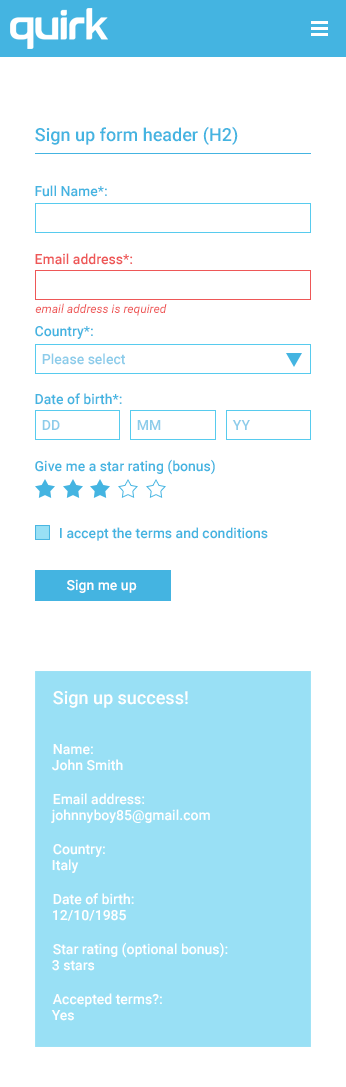
<style>
.page{position:relative;width:346px;height:1087px;background:#ffffff}
.page>*{position:absolute;margin:0}
.t1{font:18px "Roboto-Medium";color:#44b4e1}
.t2{font:14px "Roboto-Medium";color:#44b4e1}
.t3{font:14px/18px "Roboto-Medium";color:#ee5757}
.t4{font:14px/18px "Roboto-Medium";color:#44b4e1}
.t5{font:12px "Roboto-Italic";color:#ee5757}
.t6{font:14px "Roboto-Medium";color:#8cccea}
.t7{font:14px "Roboto-Medium";color:#ffffff}
.t8{font:14px/50px "Roboto-Medium";color:#ffffff}
.t9{font:18px/25px "Roboto-Medium";color:#ffffff}
</style>
<div class="page">
<p class="t1" style="left:35px;top:126px;width:203px;height:19px">Sign up form header (H2)</p>
<p class="t2" style="left:35px;top:185px;width:233px;height:356px">Full Name*:<br><br><br><br><span class="t3">Email address*:<br></span><span class="t4"><br><br><br>Country*:<br></span><br><br><br>Date of birth*:<br><br><br><br>Give me a star rating (bonus)<br><br><br><br>       I accept the terms and conditions</p>
<p class="t5" style="left:35px;top:303px;width:132px;height:13px">email address is required</p>
<p class="t6" style="left:42px;top:353px;width:83px;height:12px">Please select</p>
<p class="t6" style="left:42px;top:420px;width:18px;height:10px">DD</p>
<p class="t6" style="left:137px;top:420px;width:24px;height:10px">MM</p>
<p class="t6" style="left:232px;top:420px;width:18px;height:10px">YY</p>
<p class="t7" style="left:67px;top:579px;width:70px;height:14px">Sign me up</p>
<p class="t8" style="left:52px;top:691px;width:176px;height:316px"><span class="t9">Sign up success!<br></span>Name:<br>Email address:<br>Country:<br>Date of birth:<br>Star rating (optional bonus):<br>Accepted terms?:</p>
<p class="t8" style="left:51px;top:759px;width:159px;height:262px"><span class="t9"><br></span>John Smith<br>johnnyboy85@gmail.com<br>Italy<br>12/10/1985<br>3 stars<br>Yes</p>
</div>
